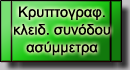
<style>
.page{position:relative;width:130px;height:70px}
.page>*{position:absolute;margin:0}
.t1{font:14.7px "ArialMT";color:#000000}
</style>
<div class="page">
<p class="t1" style="left:14px;top:6px;width:96px;height:50px;text-align:center">Κρυπτογραφ.<br>κλειδ. συνόδου<br>ασύμμετρα</p>
</div>
